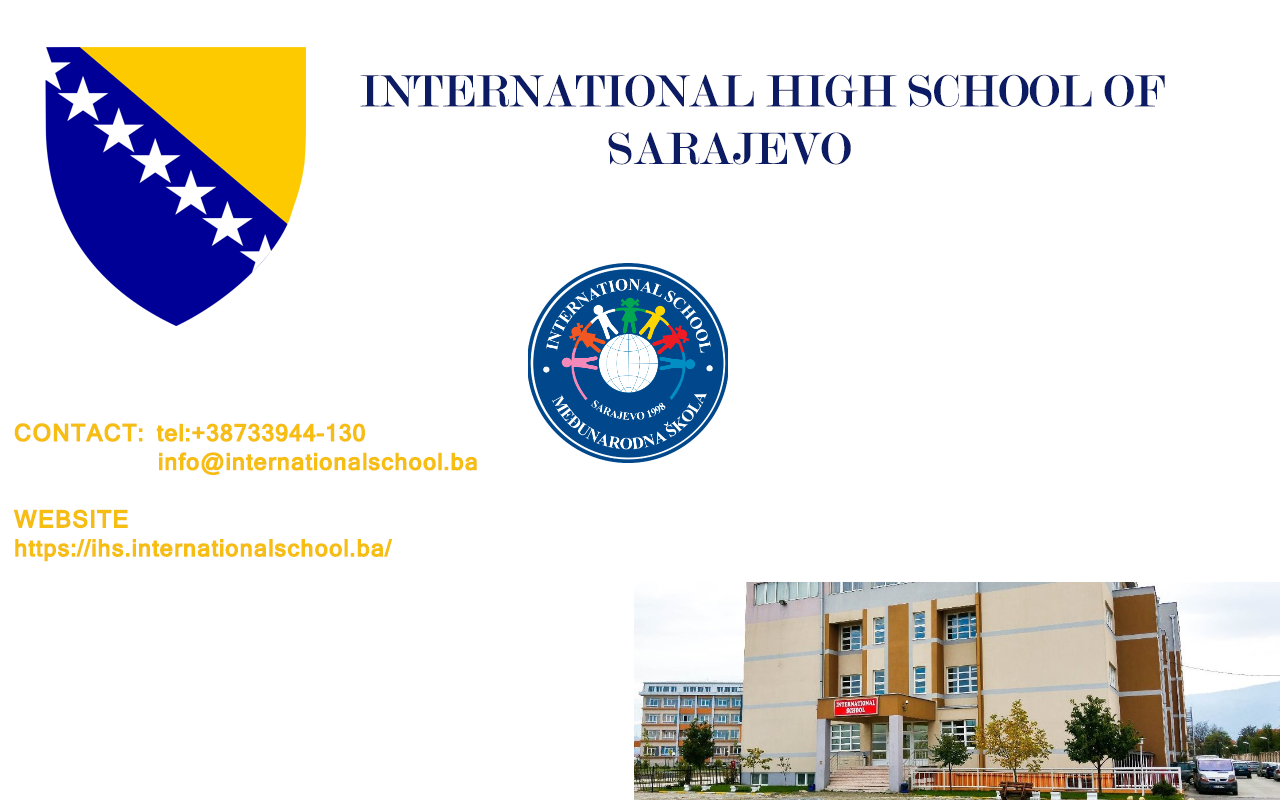
<style>
.page{position:relative;width:1280px;height:800px;background:#ffffff}
.page>*{position:absolute;margin:0}
.t1{font:48px "Modern-Regular";color:#0b1c65}
.t2{font:24px "Mangal-Bold";color:#f6be13}
</style>
<div class="page">
<p class="t1" style="left:360px;top:74px;width:805px;height:91px">INTERNATIONAL HIGH SCHOOL OF<br>                     SARAJEVO</p>
<p class="t2" style="left:13px;top:423px;width:464px;height:139px">CONTACT: tel:+38733944-130<br>            info@internationalschool.ba<br><br>WEBSITE<br>https://ihs.internationalschool.ba/</p>
</div>
